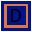
<style>
.page{position:relative;width:32px;height:32px;background:#001388}
.page>*{position:absolute;margin:0}
.t1{font:18.6px "MyriadPro-Regular";color:#000000}
</style>
<div class="page">
<p class="t1" style="left:11px;top:9px;width:10px;height:13px">D</p>
</div>
